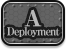
<style>
.page{position:relative;width:66px;height:49px}
.page>*{position:absolute;margin:0}
.t1{font:11px/9px "RyuminPro-ExBold";letter-spacing:-0.08em;color:#b8b8b8}
.t2{font:22px/9px "RyuminPro-ExHeavy";letter-spacing:-0.08em;color:#b8b8b8}
</style>
<div class="page">
<p class="t1" style="left:7px;top:9px;width:53px;height:28px;text-align:center"><span class="t2">A<br></span>Deployment</p>
</div>
